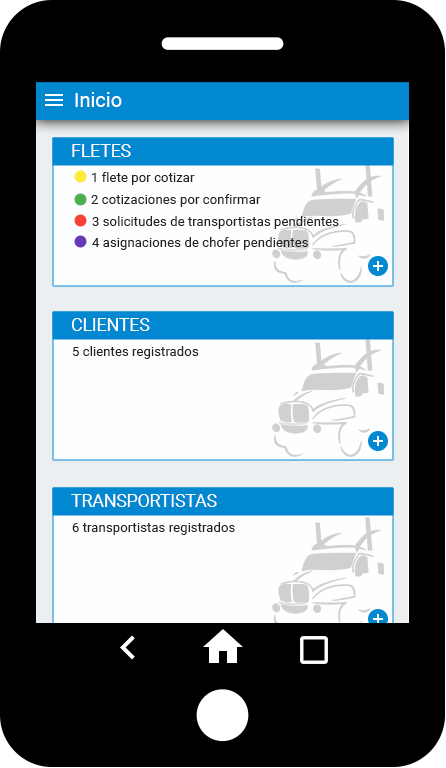
<style>
.page{position:relative;width:446px;height:768px;background:#000000}
.page>*{position:absolute;margin:0}
.t1{font:20px "Roboto-Regular";color:#ffffff}
.t2{font:17.8px "Roboto-Regular";color:#fffefe}
.t3{font:13.3px "Roboto-Regular";color:#212121}
</style>
<div class="page">
<p class="t1" style="left:75px;top:92px;width:47px;height:15px">Inicio</p>
<p class="t2" style="left:72px;top:144px;width:59px;height:13px">FLETES</p>
<p class="t3" style="left:92px;top:172px;width:103px;height:13px">1 flete por cotizar</p>
<p class="t3" style="left:91px;top:194px;width:170px;height:13px">2 cotizaciones por confirmar</p>
<p class="t3" style="left:92px;top:216px;width:247px;height:13px">3 solicitudes de transportistas pendientes</p>
<p class="t3" style="left:92px;top:237px;width:216px;height:13px">4 asignaciones de chofer pendientes</p>
<p class="t2" style="left:71px;top:318px;width:79px;height:13px">CLIENTES</p>
<p class="t3" style="left:72px;top:346px;width:127px;height:13px">5 clientes registrados</p>
<p class="t2" style="left:71px;top:494px;width:146px;height:13px">TRANSPORTISTAS</p>
<p class="t3" style="left:72px;top:522px;width:163px;height:13px">6 transportistas registrados</p>
</div>
